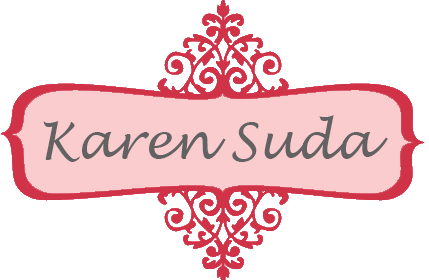
<style>
.page{position:relative;width:429px;height:280px;background:#ffffff}
.page>*{position:absolute;margin:0}
.t1{font:50px "LucidaHandwriting-Italic";color:#636262}
</style>
<div class="page">
<p class="t1" style="left:43px;top:115px;width:345px;height:47px">Karen Suda</p>
</div>
